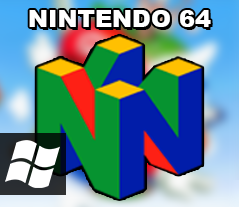
<style>
.page{position:relative;width:239px;height:207px}
.page>*{position:absolute;margin:0}
.t1{font:24px "Arial-Black";color:#ffffff}
</style>
<div class="page">
<p class="t1" style="left:29px;top:10px;width:182px;height:17px">NINTENDO 64</p>
</div>
